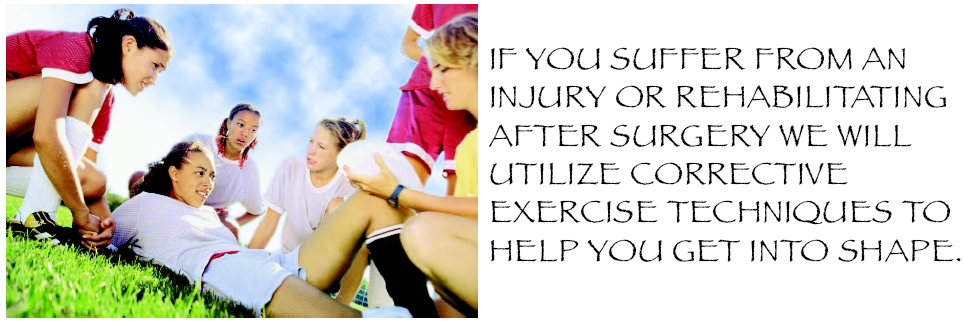
<style>
.page{position:relative;width:964px;height:322px;background:#ffffff}
.page>*{position:absolute;margin:0}
.t1{font:32px "Papyrus";letter-spacing:0.025em;color:#000000}
</style>
<div class="page">
<p class="t1" style="left:488px;top:47px;width:473px;height:215px">IF YOU SUFFER FROM AN INJURY OR REHABILITATING AFTER SURGERY WE WILL UTILIZE CORRECTIVE EXERCISE TECHNIQUES TO HELP YOU GET INTO SHAPE.</p>
</div>
